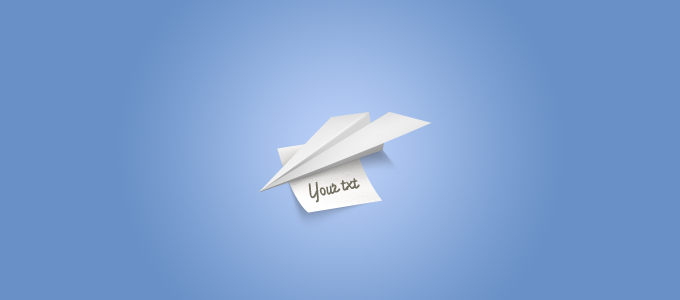
<style>
.page{position:relative;width:680px;height:300px;background:#6991c7}
.page>*{position:absolute;margin:0}
.t1{font:24.3px "SantaFeLetPlain";letter-spacing:-0.02em;color:#736f61;scale:0.83 1}
</style>
<div class="page">
<p class="t1" style="left:308px;top:178px;width:52px;height:25px;rotate:-12deg">Your txt</p>
</div>
